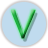
<style>
.page{position:relative;width:48px;height:48px;background:#c0dbee}
.page>*{position:absolute;margin:0}
.t1{font:45.2px "Candara"}
</style>
<div class="page">
<p class="t1" style="left:11px;top:9px;width:25px;height:30px">V</p>
</div>
